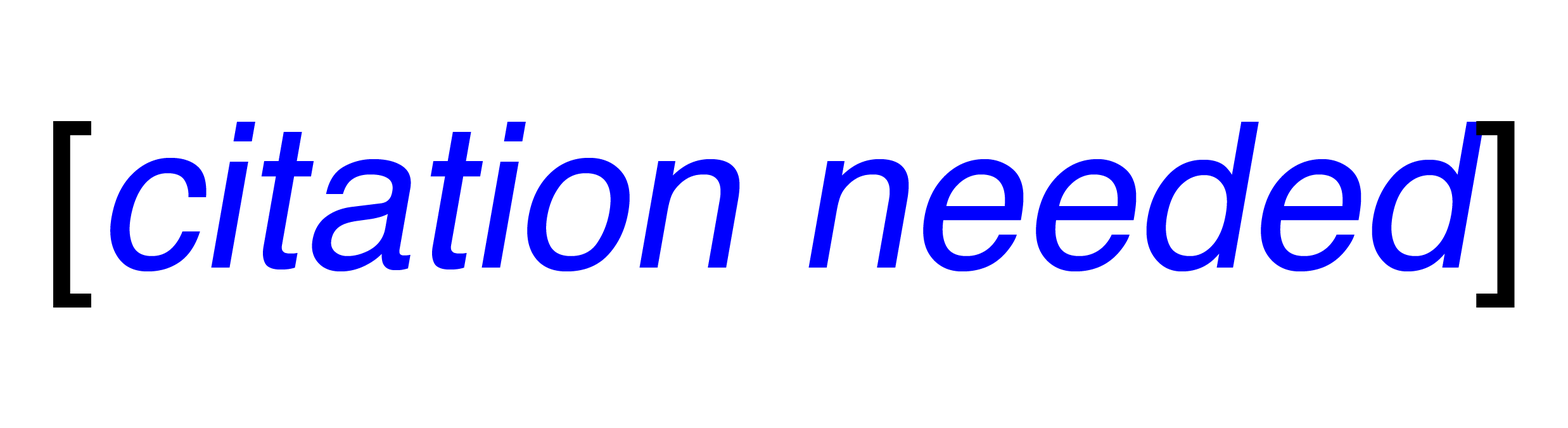
<style>
.page{position:relative;width:1568px;height:428px;background:#ffffff}
.page>*{position:absolute;margin:0}
.t1{font:202.7px "Helvetica";color:#0000ff;font-style:italic}
.t2{font:202.7px "Helvetica";color:#000000}
</style>
<div class="page">
<p class="t1" style="left:53px;top:121px;width:1462px;height:186px"><span class="t2">[</span>citation needed<span class="t2">]</span></p>
</div>
